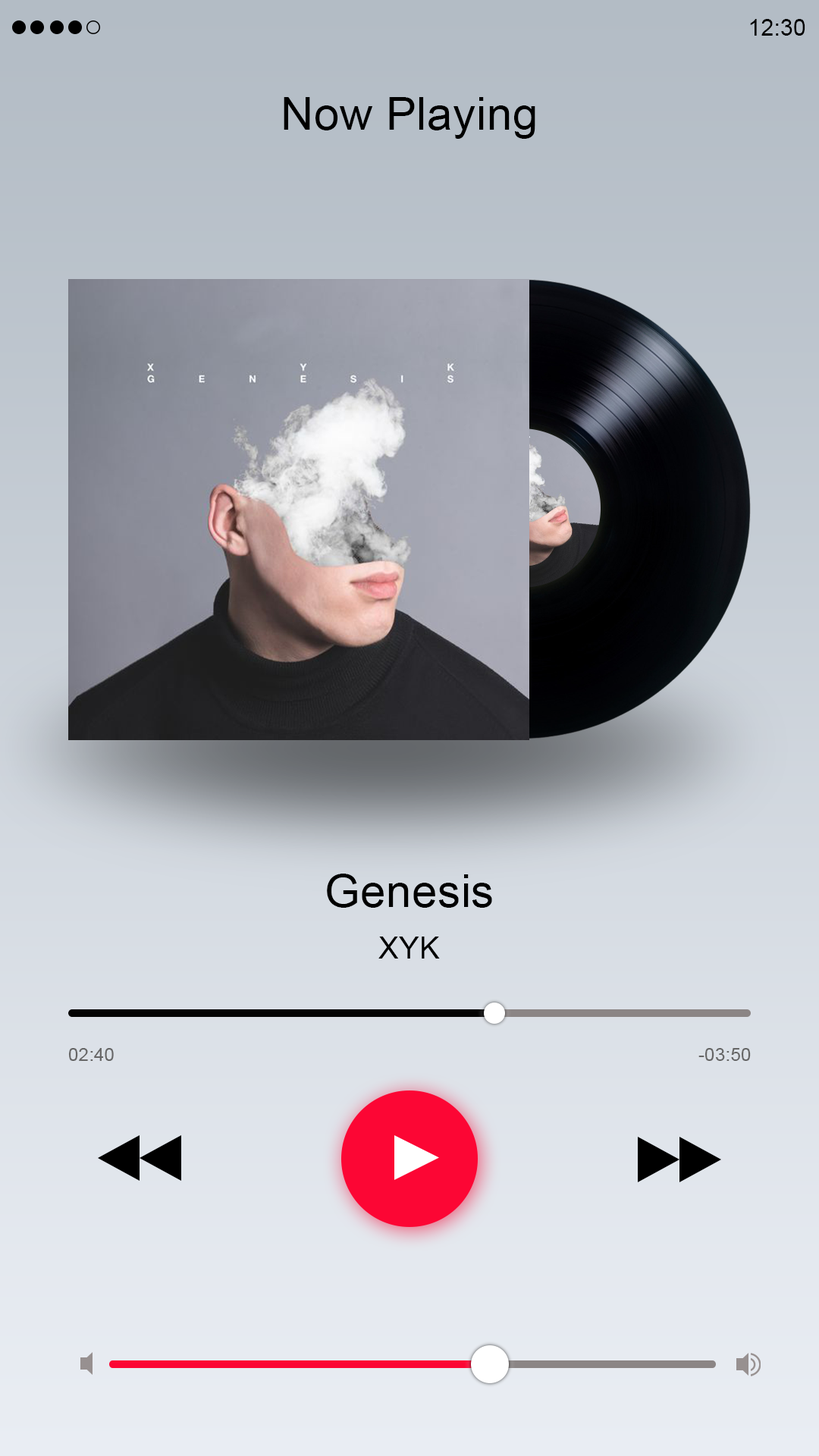
<style>
.page{position:relative;width:819px;height:1456px}
.page>*{position:absolute;margin:0}
.t1{font:22.7px "ArialMT";letter-spacing:0.01em;color:#000000}
.t2{font:45.5px "ArialMT";letter-spacing:0.01em;color:#000000}
.t3{font:45.5px/64.5px "ArialMT";letter-spacing:0.01em;color:#000000}
.t4{font:30.3px/64.5px "ArialMT";letter-spacing:0.01em;color:#000000}
.t5{font:18.2px "ArialMT";letter-spacing:0.01em;color:#666666}
</style>
<div class="page">
<p class="t1" style="left:750px;top:19px;width:55px;height:17px">12:30</p>
<p class="t2" style="left:284px;top:97px;width:251px;height:42px">Now Playing</p>
<p class="t3" style="left:327px;top:874px;width:165px;height:85px;text-align:center">Genesis<br><span class="t4">XYK</span></p>
<p class="t5" style="left:68px;top:1048px;width:46px;height:13px">02:40</p>
<p class="t5" style="left:698px;top:1048px;width:53px;height:13px">-03:50</p>
</div>
